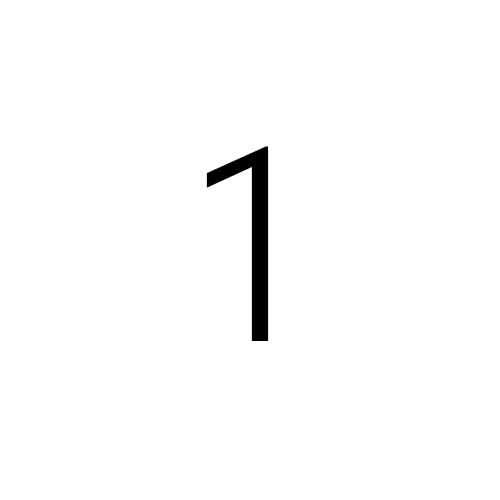
<style>
.page{position:relative;width:500px;height:500px;background:#ffffff}
.page>*{position:absolute;margin:0}
.t1{font:295.8px "NespressoLucas-Light";color:#000000}
</style>
<div class="page">
<p class="t1" style="left:206px;top:146px;width:63px;height:195px">1</p>
</div>
